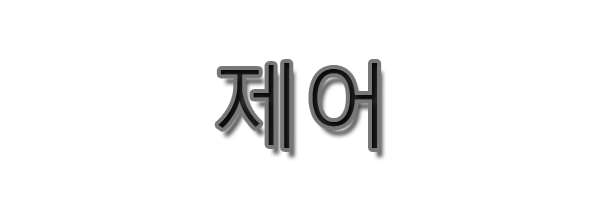
<style>
.page{position:relative;width:600px;height:200px;background:#ffffff}
.page>*{position:absolute;margin:0}
.t1{font:90px "MalgunGothic-Semilight";color:#121212}
</style>
<div class="page">
<p class="t1" style="left:218px;top:63px;width:160px;height:85px">제어</p>
</div>
